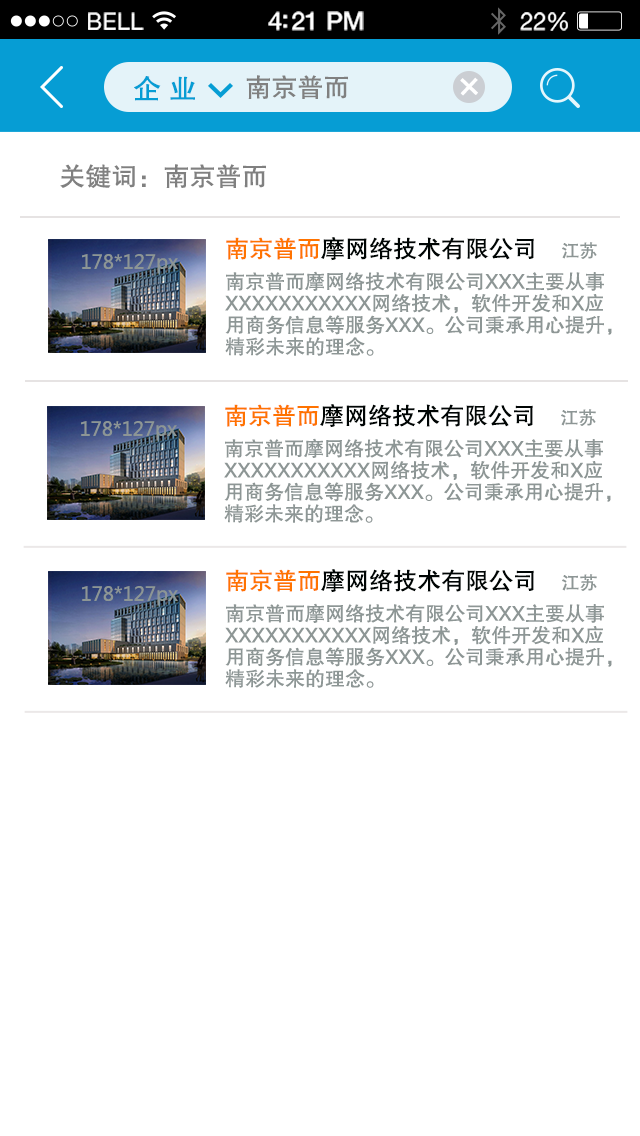
<style>
.page{position:relative;width:640px;height:1136px;background:#ffffff}
.page>*{position:absolute;margin:0}
.t1{font:23.1px "HelveticaNeue";letter-spacing:0.02em;color:#ffffff}
.t2{font:25.1px "HelveticaNeue-Medium";letter-spacing:-0.02em;color:#ffffff}
.t3{font:24.1px "HelveticaNeue";letter-spacing:-0.02em;color:#ffffff}
.t4{font:28px "FZHTJW--GB1-0";color:#069dd4}
.t5{font:26px "FZHTJW--GB1-0";color:#808080}
.t6{font:42.3px "MicrosoftYaHei";color:#ffffff}
.t7{font:20px/4.5px "FZHTJW--GB1-0";color:#8d9695}
.t8{font:24px/4.5px "FZHTJW--GB1-0";color:#ff7300}
.t9{font:24px/4.5px "FZHTJW--GB1-0";color:#000504}
.t10{font:18px/4.5px "FZHTJW--GB1-0";color:#8d9695}
.t11{font:19px "MicrosoftYaHei";color:#8d9695}
</style>
<div class="page">
<p class="t1" style="left:88px;top:12px;width:56px;height:18px">BELL</p>
<p class="t2" style="left:268px;top:11px;width:96px;height:20px">4:21 PM</p>
<p class="t3" style="left:520px;top:12px;width:48px;height:19px">22%</p>
<p class="t4" style="left:134px;top:76px;width:61px;height:25px">企 业</p>
<p class="t5" style="left:246px;top:75px;width:102px;height:24px">南京普而</p>
<p class="t6" style="left:460px;top:77px;width:18px;height:19px;rotate:43deg">+</p>
<p class="t5" style="left:60px;top:164px;width:206px;height:24px">关键词：南京普而</p>
<p class="t7" style="left:225px;top:237px;width:387px;height:119px"><span class="t8">南京普而</span><span class="t9">摩网络技术有限公司    </span><span class="t10">江苏<br><br><br><br></span>南京普而摩网络技术有限公司XXX主要从事<br><br>XXXXXXXXXXX网络技术，软件开发和X应<br><br>用商务信息等服务XXX。公司秉承用心提升，<br><br>精彩未来的理念。</p>
<p class="t11" style="left:82px;top:254px;width:96px;height:20px">178*127px</p>
<p class="t7" style="left:224px;top:404px;width:387px;height:119px"><span class="t8">南京普而</span><span class="t9">摩网络技术有限公司    </span><span class="t10">江苏<br><br><br><br></span>南京普而摩网络技术有限公司XXX主要从事<br><br>XXXXXXXXXXX网络技术，软件开发和X应<br><br>用商务信息等服务XXX。公司秉承用心提升，<br><br>精彩未来的理念。</p>
<p class="t11" style="left:81px;top:421px;width:96px;height:20px">178*127px</p>
<p class="t7" style="left:225px;top:569px;width:387px;height:119px"><span class="t8">南京普而</span><span class="t9">摩网络技术有限公司    </span><span class="t10">江苏<br><br><br><br></span>南京普而摩网络技术有限公司XXX主要从事<br><br>XXXXXXXXXXX网络技术，软件开发和X应<br><br>用商务信息等服务XXX。公司秉承用心提升，<br><br>精彩未来的理念。</p>
<p class="t11" style="left:82px;top:586px;width:96px;height:20px">178*127px</p>
</div>
